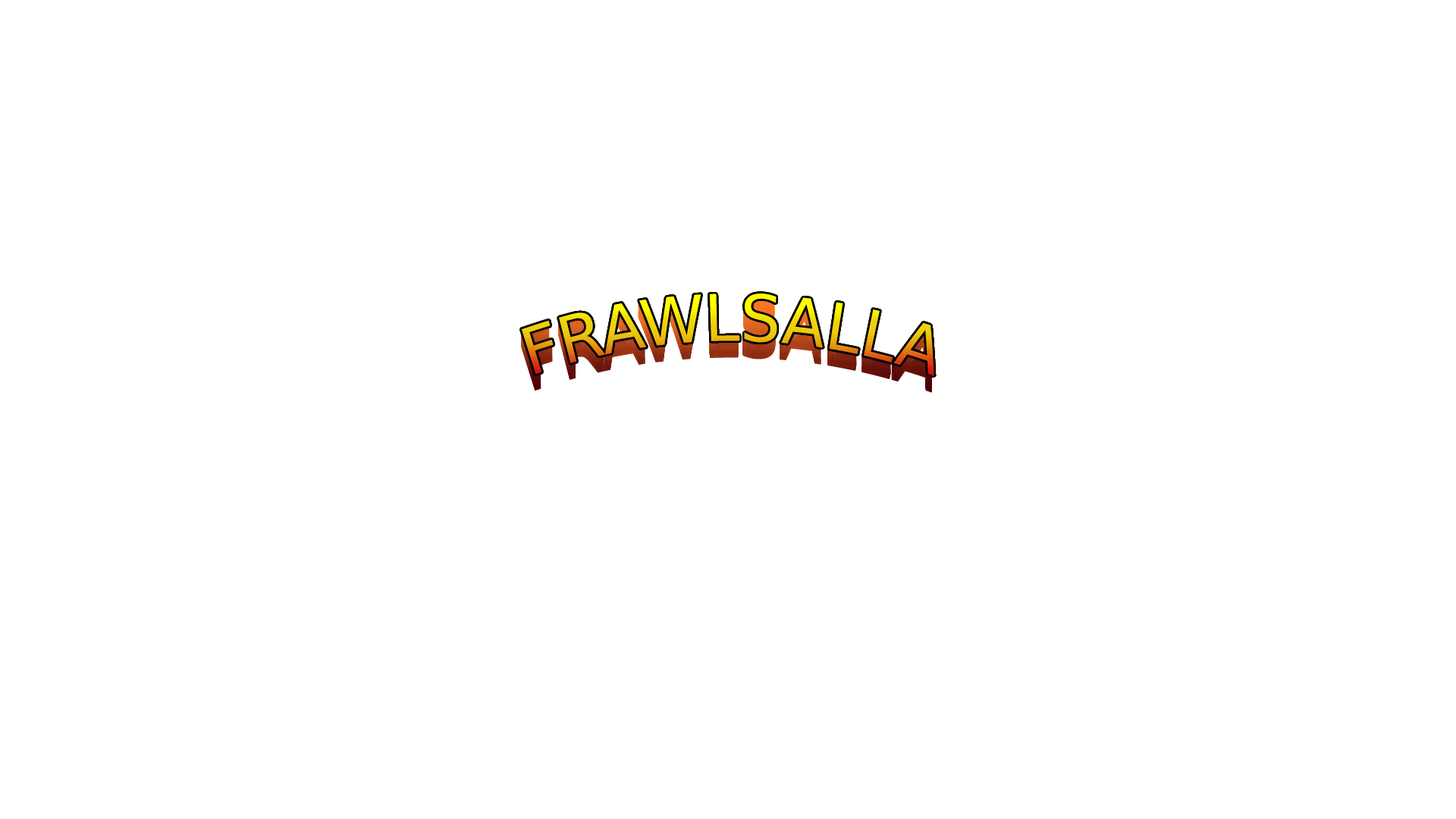
<style>
.page{position:relative;width:1456px;height:819px;background:#ffffff}
.page>*{position:absolute;margin:0}
.t1{font:64.4px "DejaVuSans";scale:0.95 1}
.t2{font:64.7px "DejaVuSans";scale:0.95 1}
</style>
<div class="page">
<p class="t1" style="left:520px;top:293px;width:412px;height:83px">FRAWLSALLA</p>
<p class="t2" style="left:521px;top:293px;width:413px;height:83px">FRAWLSALLA</p>
<p class="t1" style="left:520px;top:294px;width:412px;height:83px">FRAWLSALLA</p>
<p class="t1" style="left:520px;top:295px;width:412px;height:83px">FRAWLSALLA</p>
<p class="t1" style="left:520px;top:296px;width:412px;height:82px">FRAWLSALLA</p>
<p class="t1" style="left:520px;top:297px;width:412px;height:82px">FRAWLSALLA</p>
<p class="t1" style="left:520px;top:297px;width:412px;height:83px">FRAWLSALLA</p>
<p class="t1" style="left:520px;top:298px;width:412px;height:83px">FRAWLSALLA</p>
<p class="t1" style="left:520px;top:299px;width:412px;height:82px">FRAWLSALLA</p>
<p class="t1" style="left:520px;top:300px;width:412px;height:82px">FRAWLSALLA</p>
<p class="t1" style="left:520px;top:300px;width:412px;height:83px">FRAWLSALLA</p>
<p class="t1" style="left:520px;top:301px;width:412px;height:83px">FRAWLSALLA</p>
<p class="t1" style="left:520px;top:302px;width:412px;height:82px">FRAWLSALLA</p>
<p class="t1" style="left:520px;top:303px;width:412px;height:82px">FRAWLSALLA</p>
<p class="t1" style="left:520px;top:303px;width:412px;height:83px">FRAWLSALLA</p>
<p class="t1" style="left:520px;top:304px;width:412px;height:83px">FRAWLSALLA</p>
<p class="t1" style="left:520px;top:305px;width:412px;height:83px">FRAWLSALLA</p>
<p class="t1" style="left:520px;top:306px;width:412px;height:82px">FRAWLSALLA</p>
<p class="t1" style="left:520px;top:306px;width:412px;height:82px">FRAWLSALLA</p>
<p class="t1" style="left:520px;top:305px;width:412px;height:83px">FRAWLSALLA</p>
<p class="t1" style="left:520px;top:306px;width:412px;height:83px">FRAWLSALLA</p>
<p class="t1" style="left:520px;top:307px;width:412px;height:83px">FRAWLSALLA</p>
<p class="t1" style="left:520px;top:308px;width:412px;height:83px">FRAWLSALLA</p>
<p class="t1" style="left:520px;top:309px;width:412px;height:82px">FRAWLSALLA</p>
<p class="t1" style="left:520px;top:309px;width:412px;height:83px">FRAWLSALLA</p>
<p class="t1" style="left:520px;top:310px;width:412px;height:83px">FRAWLSALLA</p>
<p class="t1" style="left:520px;top:309px;width:412px;height:83px">FRAWLSALLA</p>
<p class="t1" style="left:520px;top:309px;width:412px;height:82px">FRAWLSALLA</p>
<p class="t1" style="left:520px;top:308px;width:412px;height:83px">FRAWLSALLA</p>
<p class="t1" style="left:520px;top:307px;width:412px;height:83px">FRAWLSALLA</p>
<p class="t1" style="left:520px;top:306px;width:412px;height:83px">FRAWLSALLA</p>
</div>
